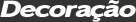
<style>
.page{position:relative;width:136px;height:22px;background:#333333}
.page>*{position:absolute;margin:0}
.t1{font:20.6px "RodinPro-EB";letter-spacing:-0.072em;color:#ffffff;font-style:italic;scale:1.33 1}
</style>
<div class="page">
<p class="t1" style="left:0px;top:0px;width:136px;height:22px">Decoração</p>
</div>
